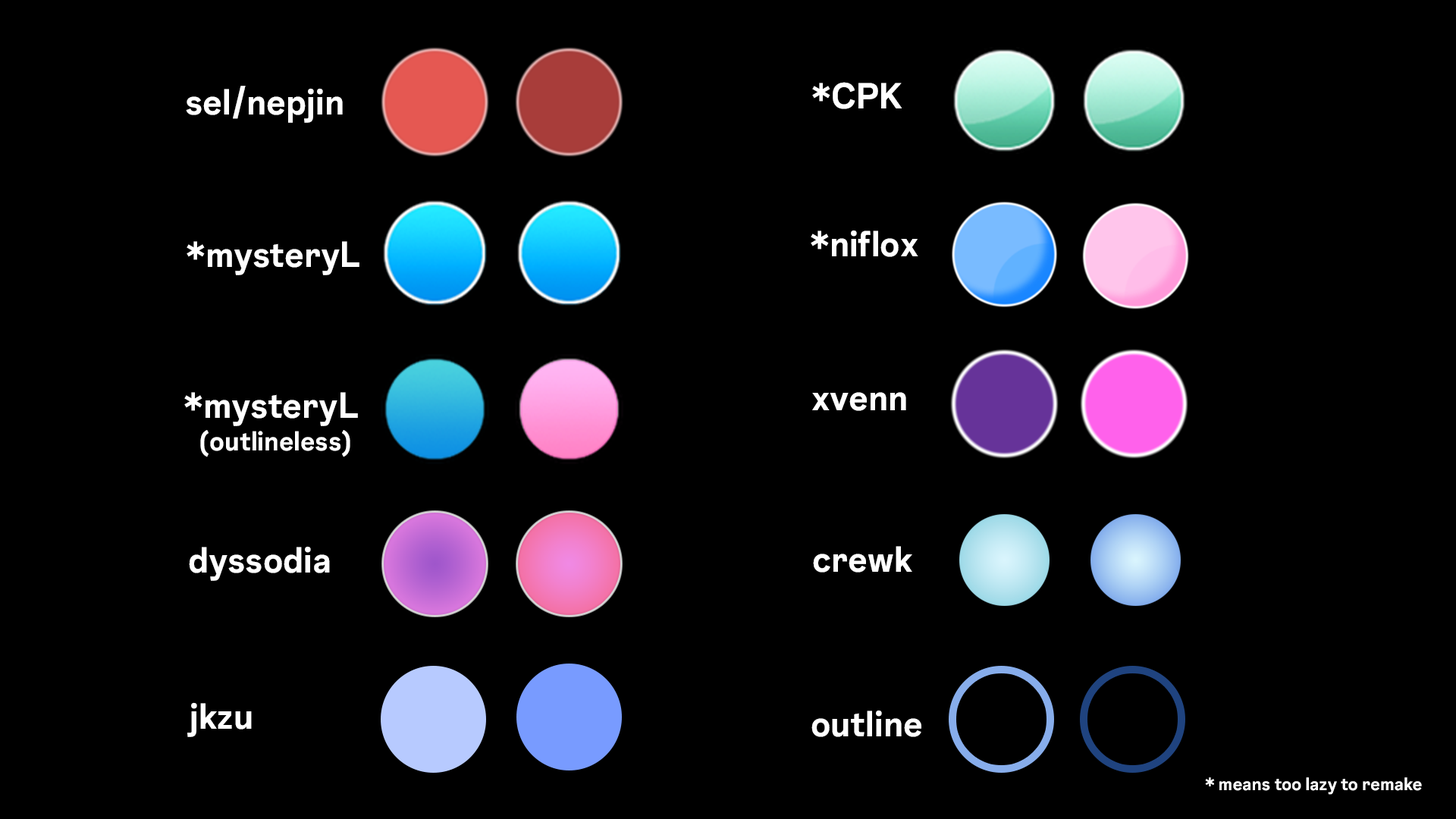
<style>
.page{position:relative;width:1456px;height:819px;background:#000000}
.page>*{position:absolute;margin:0}
.t1{font:36.4px "InstagramSans-Bold";color:#ffffff}
.t2{font:27.3px "InstagramSans-Bold";color:#ffffff}
.t3{font:18.2px "InstagramSans-Bold";color:#ffffff}
</style>
<div class="page">
<p class="t1" style="left:186px;top:86px;width:157px;height:37px">sel/nepjin</p>
<p class="t1" style="left:812px;top:82px;width:90px;height:27px">*CPK</p>
<p class="t1" style="left:811px;top:230px;width:107px;height:27px">*niflox</p>
<p class="t1" style="left:187px;top:241px;width:172px;height:34px">*mysteryL</p>
<p class="t2" style="left:184px;top:392px;width:174px;height:65px;text-align:center"><span class="t1">*mysteryL <br></span>(outlineless)</p>
<p class="t1" style="left:812px;top:392px;width:94px;height:19px">xvenn</p>
<p class="t1" style="left:189px;top:546px;width:141px;height:35px">dyssodia</p>
<p class="t1" style="left:813px;top:546px;width:99px;height:27px">crewk</p>
<p class="t1" style="left:187px;top:702px;width:65px;height:35px">jkzu</p>
<p class="t1" style="left:811px;top:710px;width:110px;height:27px">outline</p>
<p class="t3" style="left:1205px;top:777px;width:217px;height:18px">* means too lazy to remake</p>
</div>
